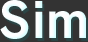
<style>
.page{position:relative;width:88px;height:42px;background:#333333}
.page>*{position:absolute;margin:0}
.t1{font:48px "RodinPro-B";color:#fffeff}
</style>
<div class="page">
<p class="t1" style="left:0px;top:0px;width:86px;height:39px">Sim</p>
</div>
